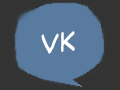
<style>
.page{position:relative;width:120px;height:90px;background:#597b9f}
.page>*{position:absolute;margin:0}
.t1{font:32px "SuplexmentaryComicNC";color:#ffffff;scale:0.8 1}
</style>
<div class="page">
<p class="t1" style="left:41px;top:31px;width:34px;height:23px;rotate:-4deg">VK</p>
</div>
